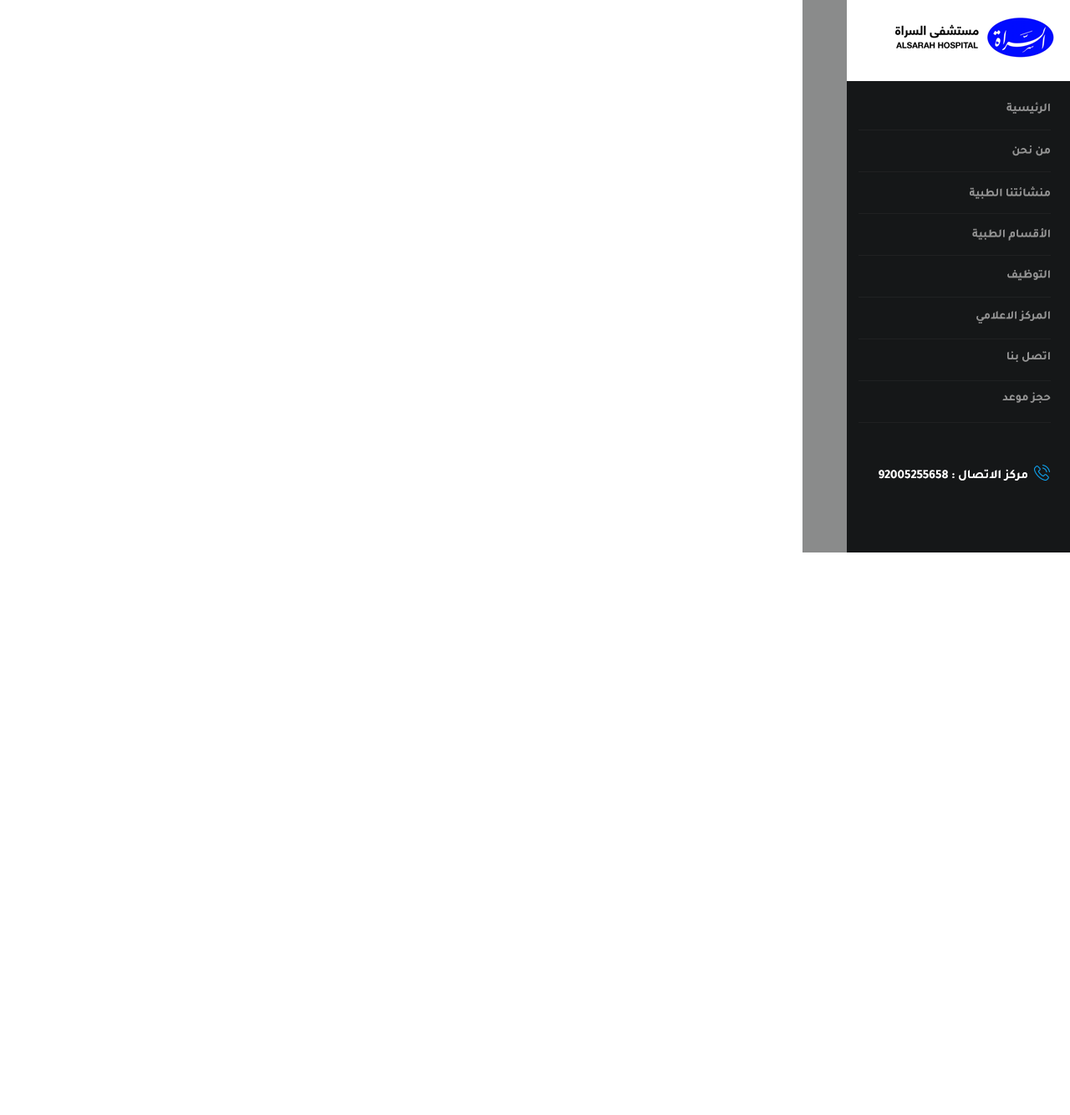
<style>
.page{position:relative;width:1070px;height:1115px;background:#ffffff}
.page>*{position:absolute;margin:0}
.t1{font:11.7px/35.9px "Tajawal-Bold";color:#949494}
.t2{font:11.7px/34.3px "Tajawal-Bold";color:#949494}
.t3{font:12.5px "Tajawal-Bold";color:#ffffff}
</style>
<div class="page">
<p class="t1" style="left:1006px;top:102px;width:44px;height:54px">الرئيسية       <br>من نحن</p>
<p class="t2" style="left:969px;top:186px;width:81px;height:217px">منشائتنا الطبية        <br>الأقسام الطبية        <br>التوظيف        <br>المركز الاعلامي       <br>اتصل بنا       <br>حجز موعد</p>
<p class="t3" style="left:878px;top:469px;width:149px;height:12px">مركز الاتصال : 92005255658</p>
</div>
